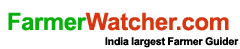
<style>
.page{position:relative;width:240px;height:49px;background:#ffffff}
.page>*{position:absolute;margin:0}
.t1{font:24px "Arial-BoldMT";letter-spacing:-0.01em;color:#d83611}
.t2{font:24px "Arial-BoldMT";letter-spacing:-0.01em;color:#08b00c}
.t3{font:10.7px "Arial-BoldMT";letter-spacing:-0.01em;color:#000000}
</style>
<div class="page">
<p class="t1" style="left:8px;top:12px;width:221px;height:19px"><span class="t2">Farmer</span>Watcher.com</p>
<p class="t3" style="left:105px;top:37px;width:134px;height:11px">India largest Farmer Guider</p>
</div>
